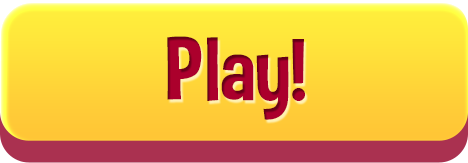
<style>
.page{position:relative;width:468px;height:163px}
.page>*{position:absolute;margin:0}
.t1{font:90px "DimboRegular";color:#ab002c}
</style>
<div class="page">
<p class="t1" style="left:167px;top:36px;width:139px;height:84px">Play!</p>
</div>
